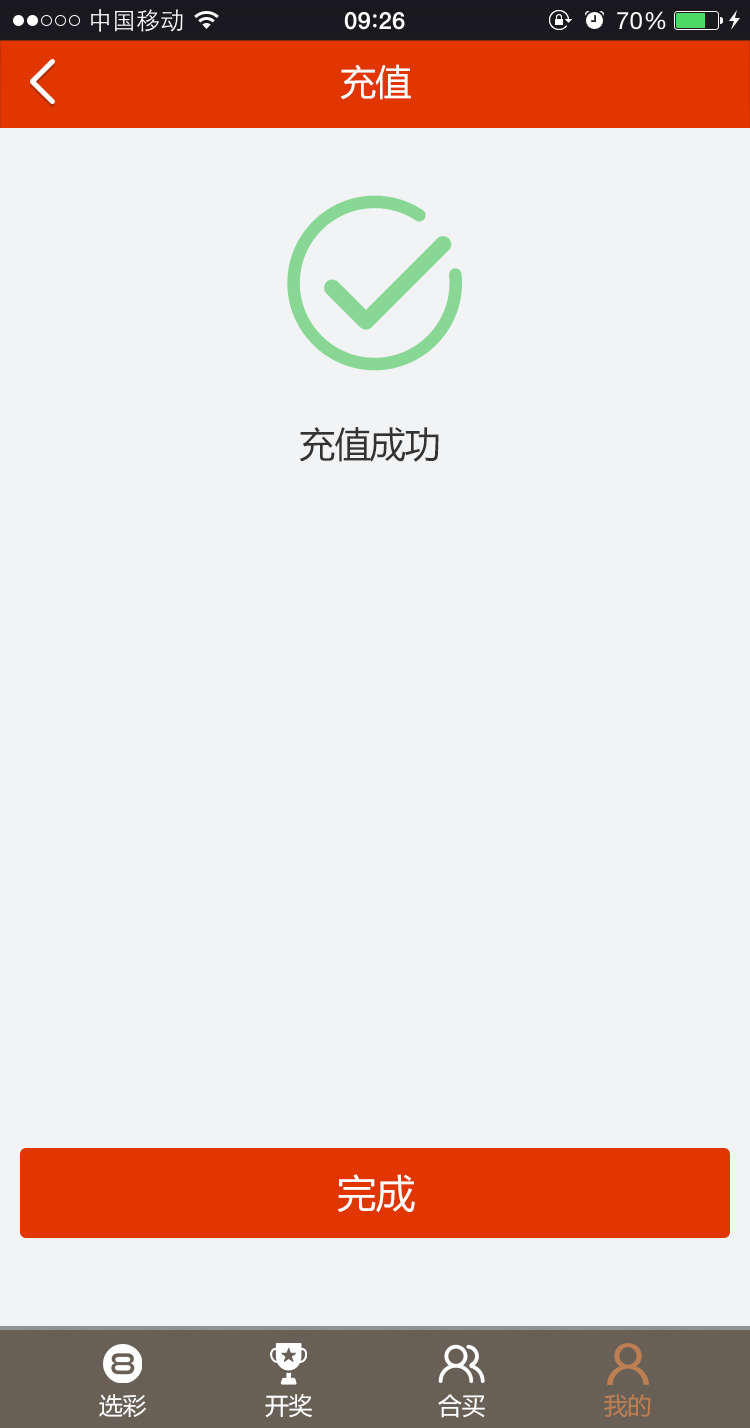
<style>
.page{position:relative;width:750px;height:1428px;background:#f2f3f5}
.page>*{position:absolute;margin:0}
.t1{font:36px "MicrosoftYaHei";letter-spacing:-0.025em;color:#ffffff}
.t2{font:36px "MicrosoftYaHei";letter-spacing:-0.025em;color:#333333}
.t3{font:39px "MicrosoftYaHei";color:#ffffff}
.t4{font:24px "MicrosoftYaHei";letter-spacing:-0.025em;color:#ffffff}
.t5{font:24px "MicrosoftYaHei";letter-spacing:-0.025em;color:#bc7e53}
</style>
<div class="page">
<p class="t1" style="left:340px;top:64px;width:71px;height:36px">充值</p>
<p class="t2" style="left:299px;top:427px;width:140px;height:35px">充值成功</p>
<p class="t3" style="left:337px;top:1174px;width:78px;height:39px">完成</p>
<p class="t4" style="left:99px;top:1394px;width:47px;height:23px">选彩</p>
<p class="t4" style="left:265px;top:1394px;width:48px;height:24px">开奖</p>
<p class="t4" style="left:438px;top:1394px;width:47px;height:24px">合买</p>
<p class="t5" style="left:604px;top:1394px;width:47px;height:23px">我的</p>
</div>
